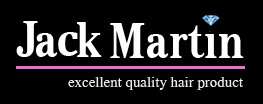
<style>
.page{position:relative;width:263px;height:104px;background:#000000}
.page>*{position:absolute;margin:0}
.t1{font:72px "KodchiangUPCBold";color:#ffffff}
.t2{font:48px "Cambria-Bold";color:#ffffff}
.t3{font:18px "ShonarBangla";color:#eeeeee}
</style>
<div class="page">
<p class="t1" style="left:16px;top:21px;width:22px;height:36px">J</p>
<p class="t1" style="left:77px;top:22px;width:25px;height:35px">k</p>
<p class="t1" style="left:36px;top:33px;width:22px;height:24px">a</p>
<p class="t2" style="left:58px;top:32px;width:20px;height:24px">c</p>
<p class="t3" style="left:68px;top:77px;width:175px;height:13px">excellent quality hair product</p>
</div>
